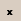
<style>
.page{position:relative;width:21px;height:21px;background:#d9cdc1}
.page>*{position:absolute;margin:0}
.t1{font:9px "Tahoma-Bold";color:#000000}
</style>
<div class="page">
<p class="t1" style="left:7px;top:10px;width:6px;height:5px">x</p>
</div>
